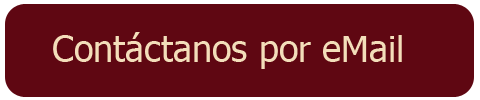
<style>
.page{position:relative;width:480px;height:100px;background:#5f0712}
.page>*{position:absolute;margin:0}
.t1{font:36px "Tahoma";color:#f3deba}
</style>
<div class="page">
<p class="t1" style="left:53px;top:32px;width:349px;height:37px">Contáctanos por eMail</p>
</div>
